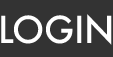
<style>
.page{position:relative;width:113px;height:57px;background:#333333}
.page>*{position:absolute;margin:0}
.t1{font:35.9px "Futura-Medium";letter-spacing:-0.01em;color:#ffffff}
</style>
<div class="page">
<p class="t1" style="left:1px;top:14px;width:111px;height:31px">LOGIN</p>
</div>
